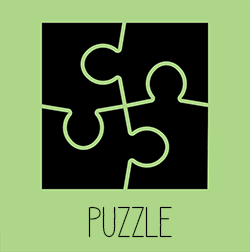
<style>
.page{position:relative;width:250px;height:252px;background:#add688}
.page>*{position:absolute;margin:0}
.t1{font:60px "Adrift";color:#000000}
</style>
<div class="page">
<p class="t1" style="left:88px;top:206px;width:84px;height:32px">Puzzle</p>
</div>
